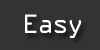
<style>
.page{position:relative;width:100px;height:50px;background:#333333}
.page>*{position:absolute;margin:0}
.t1{font:23.9px "OCRAStd";letter-spacing:-0.1em;color:#ffffff}
</style>
<div class="page">
<p class="t1" style="left:25px;top:14px;width:56px;height:24px">Easy</p>
</div>
